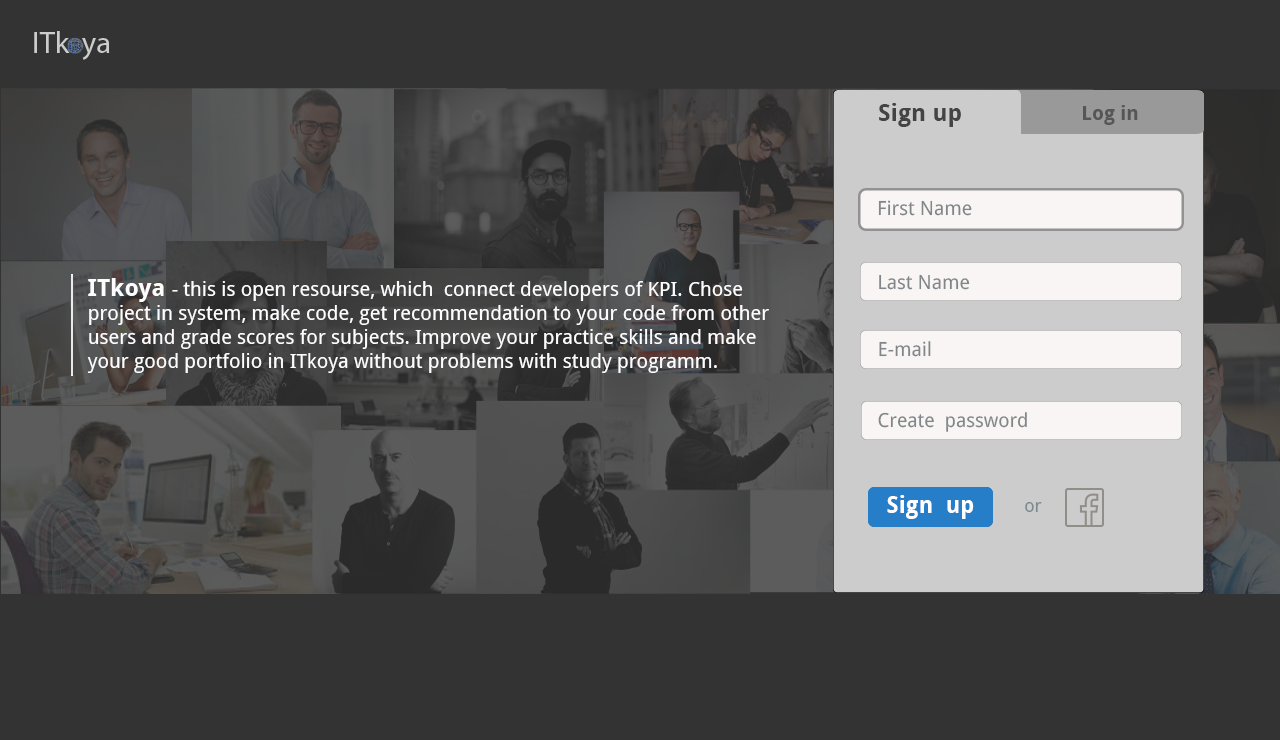
<style>
.page{position:relative;width:1280px;height:740px;background:#333333}
.page>*{position:absolute;margin:0}
.t1{font:24px "DroidSans-Bold";color:#434443}
.t2{font:20px "DroidSans-Bold";color:#575555}
.t3{font:19.5px "DroidSans";color:#818789}
.t4{font:20px "DroidSans";color:#fdfdff}
.t5{font:24px "DroidSans-Bold";color:#fdfdff}
.t6{font:23.2px "DroidSans-Bold";color:#fefefe}
.t7{font:18px "DroidSans";color:#7e8b8e}
</style>
<div class="page">
<p class="t1" style="left:879px;top:103px;width:82px;height:24px">Sign up</p>
<p class="t2" style="left:1083px;top:105px;width:55px;height:20px">Log in</p>
<p class="t3" style="left:878px;top:200px;width:94px;height:16px">First Name</p>
<p class="t4" style="left:87px;top:278px;width:682px;height:95px;text-align:right"><span class="t5">ITkoya </span>- this is open resourse, which  connect developers of KPI. Chose project in system, make code, get recommendation to your code from other users and grade scores for subjects. Improve your practice skills and make your good portfolio in ITkoya without problems with study programm.</p>
<p class="t3" style="left:879px;top:274px;width:91px;height:16px">Last Name</p>
<p class="t3" style="left:879px;top:341px;width:52px;height:16px">E-mail</p>
<p class="t3" style="left:878px;top:412px;width:149px;height:20px">Create  password</p>
<p class="t6" style="left:887px;top:495px;width:87px;height:24px">Sign  up</p>
<p class="t7" style="left:1025px;top:502px;width:17px;height:10px">or</p>
</div>
